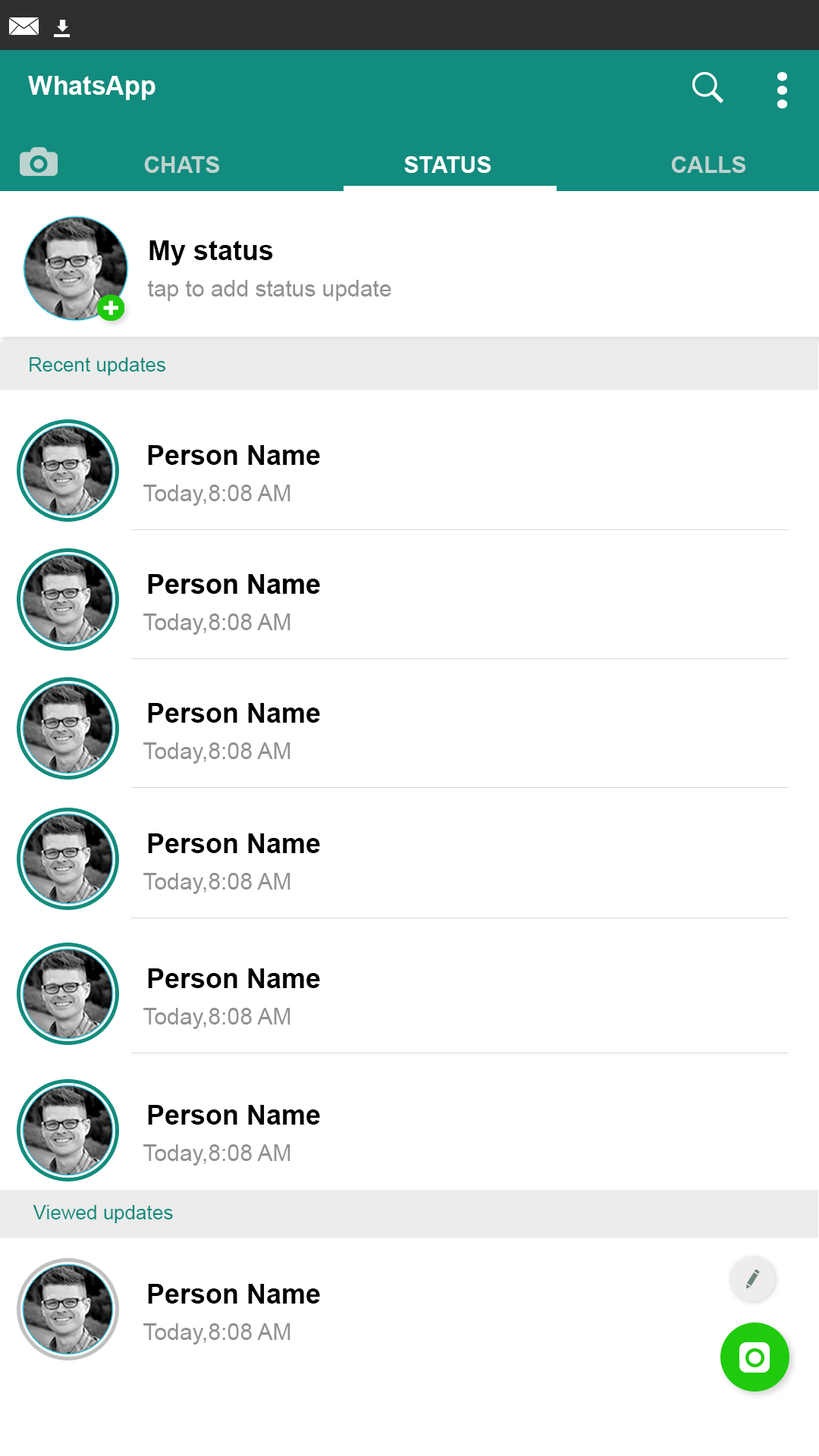
<style>
.page{position:relative;width:819px;height:1456px;background:#ffffff}
.page>*{position:absolute;margin:0}
.t1{font:25.8px "Arial-BoldMT";color:#ffffff}
.t2{font:22.7px "Arial-BoldMT";color:#bdd3d0}
.t3{font:22.7px "Arial-BoldMT";color:#fefefe}
.t4{font:27.3px "Arial-BoldMT";color:#000000}
.t5{font:22.7px "ArialMT";color:#919191}
.t6{font:19.7px "ArialMT";color:#128c7e}
</style>
<div class="page">
<p class="t1" style="left:28px;top:76px;width:127px;height:24px">WhatsApp</p>
<p class="t2" style="left:144px;top:156px;width:75px;height:17px">CHATS</p>
<p class="t3" style="left:404px;top:156px;width:87px;height:17px">STATUS</p>
<p class="t2" style="left:671px;top:156px;width:74px;height:17px">CALLS</p>
<p class="t4" style="left:149px;top:240px;width:124px;height:25px">My status</p>
<p class="t5" style="left:148px;top:280px;width:243px;height:21px">tap to add status update</p>
<p class="t6" style="left:30px;top:357px;width:136px;height:18px">Recent updates</p>
<p class="t4" style="left:148px;top:445px;width:172px;height:20px">Person Name</p>
<p class="t5" style="left:143px;top:485px;width:147px;height:21px">Today,8:08 AM</p>
<p class="t4" style="left:148px;top:574px;width:172px;height:20px">Person Name</p>
<p class="t5" style="left:143px;top:613px;width:147px;height:22px">Today,8:08 AM</p>
<p class="t4" style="left:148px;top:703px;width:172px;height:20px">Person Name</p>
<p class="t5" style="left:143px;top:742px;width:147px;height:22px">Today,8:08 AM</p>
<p class="t4" style="left:148px;top:833px;width:172px;height:20px">Person Name</p>
<p class="t5" style="left:143px;top:873px;width:147px;height:21px">Today,8:08 AM</p>
<p class="t4" style="left:148px;top:968px;width:172px;height:20px">Person Name</p>
<p class="t5" style="left:143px;top:1008px;width:147px;height:21px">Today,8:08 AM</p>
<p class="t4" style="left:148px;top:1105px;width:172px;height:20px">Person Name</p>
<p class="t5" style="left:143px;top:1144px;width:147px;height:22px">Today,8:08 AM</p>
<p class="t6" style="left:33px;top:1205px;width:140px;height:18px">Viewed updates</p>
<p class="t4" style="left:148px;top:1284px;width:172px;height:20px">Person Name</p>
<p class="t5" style="left:143px;top:1323px;width:147px;height:22px">Today,8:08 AM</p>
</div>
